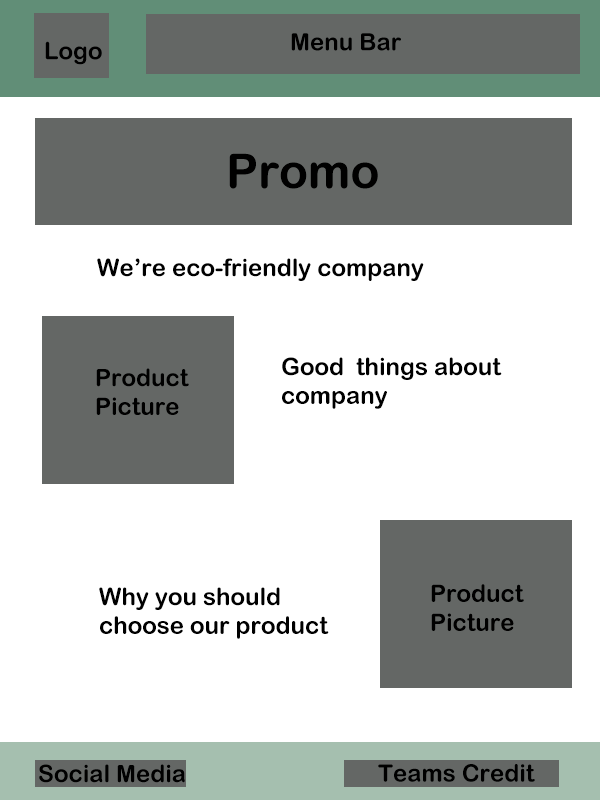
<style>
.page{position:relative;width:600px;height:800px;background:#ffffff}
.page>*{position:absolute;margin:0}
.t1{font:24px "ArialRoundedMTBold";color:#000000}
.t2{font:48px "ArialRoundedMTBold";color:#000000}
</style>
<div class="page">
<p class="t1" style="left:45px;top:41px;width:57px;height:24px">Logo</p>
<p class="t1" style="left:291px;top:33px;width:110px;height:18px">Menu Bar</p>
<p class="t2" style="left:229px;top:153px;width:149px;height:36px">Promo</p>
<p class="t1" style="left:97px;top:258px;width:327px;height:23px">We’re eco-friendly company</p>
<p class="t1" style="left:282px;top:357px;width:220px;height:52px">Good  things about <br>company</p>
<p class="t1" style="left:96px;top:368px;width:93px;height:47px">Product <br>Picture</p>
<p class="t1" style="left:99px;top:587px;width:230px;height:52px">Why you should <br>choose our product</p>
<p class="t1" style="left:431px;top:584px;width:93px;height:47px">Product <br>   Picture</p>
<p class="t1" style="left:39px;top:764px;width:146px;height:19px">Social Media</p>
<p class="t1" style="left:378px;top:764px;width:157px;height:18px">Teams Credit</p>
</div>
